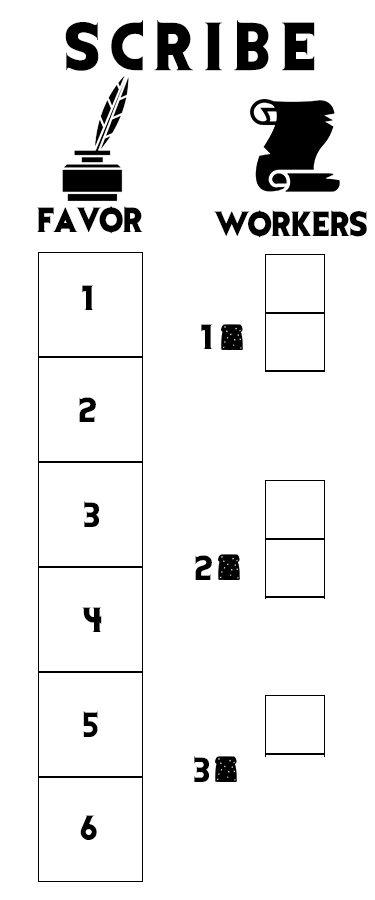
<style>
.page{position:relative;width:375px;height:900px;background:#ffffff}
.page>*{position:absolute;margin:0}
.t1{font:56.2px "EvilDead";letter-spacing:0.2em;color:#000000}
.t2{font:29.2px "EvilDead";color:#000000}
</style>
<div class="page">
<p class="t1" style="left:65px;top:20px;width:250px;height:51px">SCRIBE</p>
<p class="t2" style="left:37px;top:206px;width:106px;height:28px">FAVOR</p>
<p class="t2" style="left:213px;top:210px;width:154px;height:28px">WORKERS</p>
<p class="t2" style="left:82px;top:285px;width:12px;height:25px">1</p>
<p class="t2" style="left:201px;top:324px;width:12px;height:25px">1</p>
<p class="t2" style="left:79px;top:397px;width:17px;height:25px">2</p>
<p class="t2" style="left:84px;top:501px;width:15px;height:26px">3</p>
<p class="t2" style="left:195px;top:555px;width:17px;height:25px">2</p>
<p class="t2" style="left:82px;top:607px;width:20px;height:25px">4</p>
<p class="t2" style="left:83px;top:711px;width:15px;height:26px">5</p>
<p class="t2" style="left:194px;top:756px;width:15px;height:26px">3</p>
<p class="t2" style="left:80px;top:815px;width:17px;height:25px">6</p>
</div>
